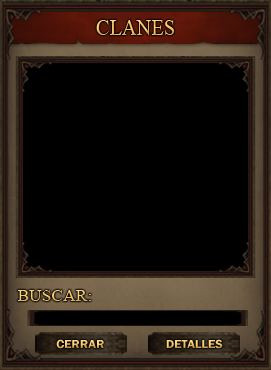
<style>
.page{position:relative;width:271px;height:370px;background:#000000}
.page>*{position:absolute;margin:0}
.t1{font:23.3px "TimesNewRomanPSMT";color:#f6c767;scale:0.88 1}
.t2{font:16px "TimesNewRomanPSMT";scale:1.09 1}
.t3{font:12px "FranklinGothic-Demi";scale:1.07 1}
</style>
<div class="page">
<p class="t1" style="left:96px;top:20px;width:79px;height:16px">CLANES</p>
<p class="t2" style="left:18px;top:290px;width:73px;height:11px">BUSCAR:</p>
<p class="t3" style="left:56px;top:339px;width:48px;height:10px">CERRAR</p>
<p class="t3" style="left:166px;top:339px;width:57px;height:10px">DETALLES</p>
</div>
